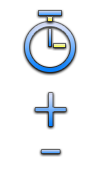
<style>
.page{position:relative;width:100px;height:180px;background:#ffffff}
.page>*{position:absolute;margin:0}
.t1{font:75px "Calibri"}
</style>
<div class="page">
<p class="t1" style="left:34px;top:92px;width:33px;height:35px">+</p>
</div>
